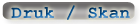
<style>
.page{position:relative;width:140px;height:24px}
.page>*{position:absolute;margin:0}
.t1{font:18px "CourierNewPS-BoldMT"}
</style>
<div class="page">
<p class="t1" style="left:11px;top:5px;width:119px;height:15px">Druk / Skan</p>
</div>
